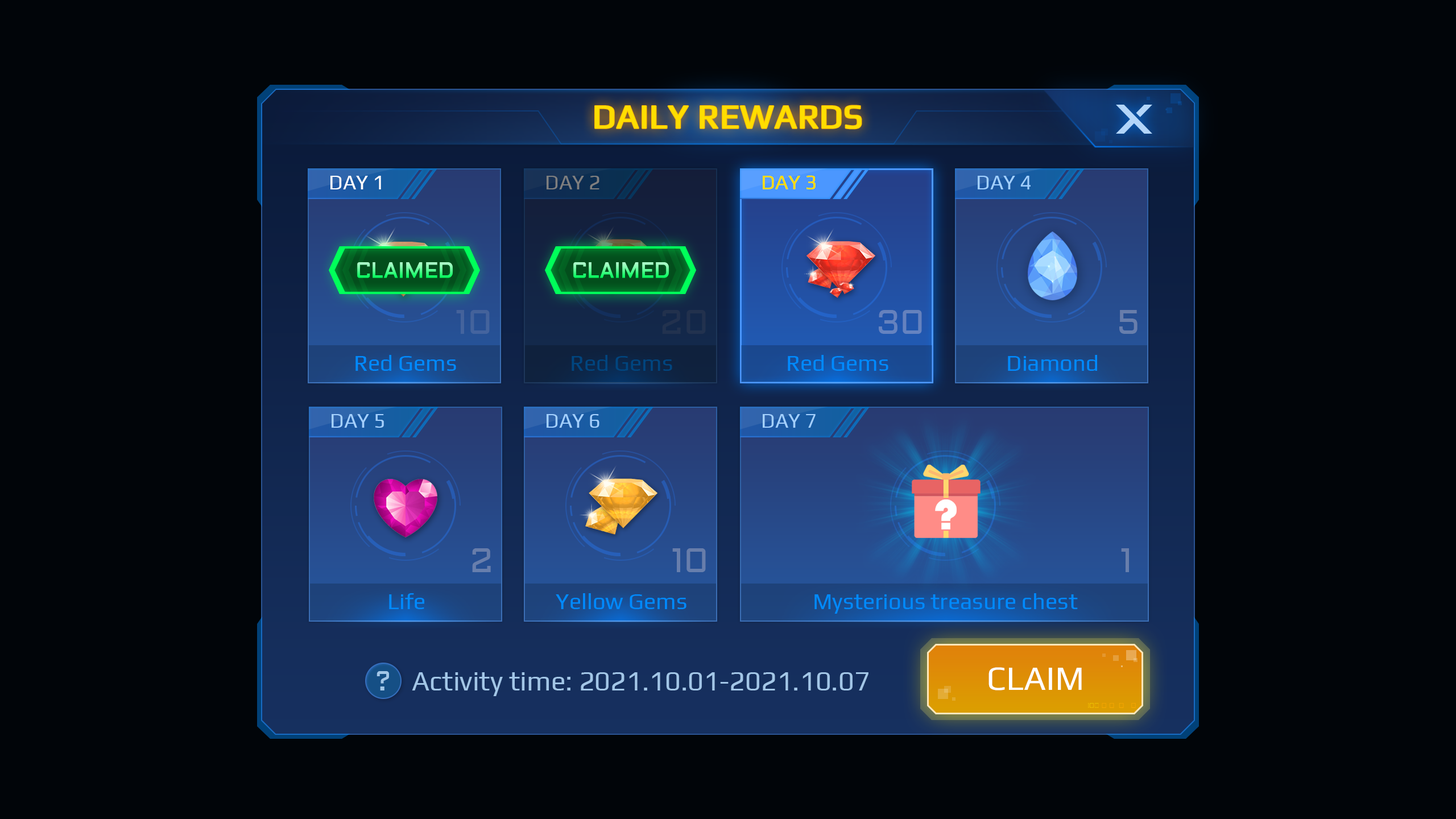
<style>
.page{position:relative;width:1456px;height:819px;background:#010509}
.page>*{position:absolute;margin:0}
.t1{font:34.1px "Play-Regular";color:#ffde00;font-weight:bold}
.t2{font:20.5px "Play-Regular";color:#ffffff}
.t3{font:20.5px "Play-Regular";color:#7f7f7f}
.t4{font:20.5px "Play-Regular";color:#ffdd00}
.t5{font:20.5px "Play-Regular";color:#a2d0ff}
.t6{font:21.5px "Aldrich";font-weight:bold;scale:0.95 1}
.t7{font:34.1px "Aldrich";color:#44639c}
.t8{font:34.1px "Aldrich";color:#22314e}
.t9{font:34.1px "Aldrich";color:#6582be}
.t10{font:34.1px "Aldrich";color:#687eab}
.t11{font:22.7px "Play-Regular";color:#008aff}
.t12{font:22.7px "Play-Regular";color:#00457f}
.t13{font:20.5px "Play-Regular";color:#a3d0ff}
.t14{font:34.1px "Aldrich";color:#687eac}
.t15{font:27.3px "Aldrich";color:#a2c6e7}
.t16{font:27.3px "Play-Regular";color:#a2c6e7}
.t17{font:34.1px "Play-Regular";color:#ffffff}
</style>
<div class="page">
<p class="t1" style="left:595px;top:105px;width:267px;height:24px">DAILY REWARDS</p>
<p class="t2" style="left:330px;top:176px;width:51px;height:13px">DAY 1</p>
<p class="t3" style="left:547px;top:176px;width:52px;height:13px">DAY 2</p>
<p class="t4" style="left:763px;top:175px;width:53px;height:14px">DAY 3</p>
<p class="t5" style="left:978px;top:176px;width:53px;height:13px">DAY 4</p>
<p class="t6" style="left:357px;top:262px;width:96px;height:16px">CLAIMED</p>
<p class="t6" style="left:573px;top:262px;width:96px;height:16px">CLAIMED</p>
<p class="t7" style="left:456px;top:310px;width:34px;height:24px">10</p>
<p class="t8" style="left:662px;top:310px;width:44px;height:24px">20</p>
<p class="t9" style="left:879px;top:310px;width:43px;height:24px">30</p>
<p class="t10" style="left:1119px;top:310px;width:18px;height:24px">5</p>
<p class="t11" style="left:355px;top:355px;width:101px;height:16px">Red Gems</p>
<p class="t12" style="left:572px;top:355px;width:100px;height:16px">Red Gems</p>
<p class="t11" style="left:788px;top:355px;width:100px;height:16px">Red Gems</p>
<p class="t11" style="left:1008px;top:355px;width:89px;height:16px">Diamond</p>
<p class="t13" style="left:332px;top:414px;width:52px;height:14px">DAY 5</p>
<p class="t13" style="left:547px;top:414px;width:52px;height:14px">DAY 6</p>
<p class="t13" style="left:763px;top:414px;width:53px;height:14px">DAY 7</p>
<p class="t14" style="left:472px;top:548px;width:19px;height:24px">2</p>
<p class="t10" style="left:672px;top:548px;width:34px;height:24px">10</p>
<p class="t10" style="left:1121px;top:548px;width:8px;height:24px">1</p>
<p class="t11" style="left:389px;top:593px;width:35px;height:16px">Life</p>
<p class="t11" style="left:556px;top:593px;width:130px;height:16px">Yellow Gems</p>
<p class="t11" style="left:814px;top:593px;width:264px;height:21px">Mysterious treasure chest</p>
<p class="t15" style="left:377px;top:671px;width:12px;height:19px">?</p>
<p class="t16" style="left:412px;top:672px;width:456px;height:24px">Activity time: 2021.10.01-2021.10.07</p>
<p class="t17" style="left:988px;top:667px;width:94px;height:23px">CLAIM</p>
</div>
